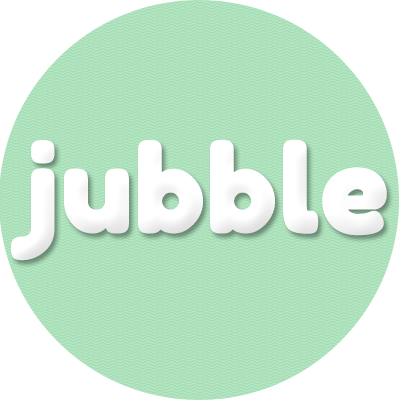
<style>
.page{position:relative;width:400px;height:400px;background:#ffffff}
.page>*{position:absolute;margin:0}
.t1{font:117px "FredokaOne-Regular";color:#ffffff;font-weight:bold}
</style>
<div class="page">
<p class="t1" style="left:10px;top:139px;width:377px;height:122px">jubble</p>
</div>
